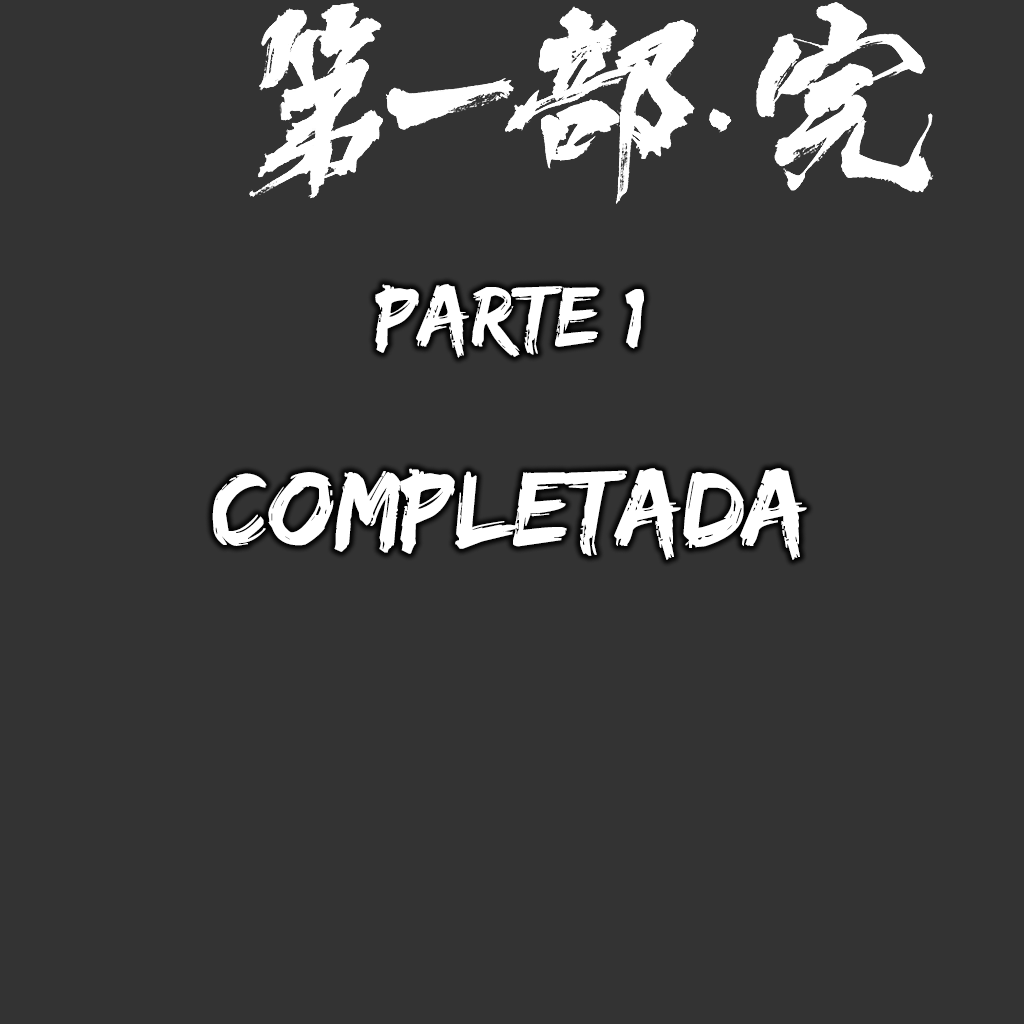
<style>
.page{position:relative;width:1024px;height:1024px;background:#333333}
.page>*{position:absolute;margin:0}
.t1{font:88.5px "EdoSZ";color:#ffffff}
.t2{font:109.9px "EdoSZ";color:#ffffff}
</style>
<div class="page">
<p class="t1" style="left:375px;top:284px;width:269px;height:74px">parte 1</p>
<p class="t2" style="left:212px;top:468px;width:595px;height:92px">COMPLETADA</p>
</div>
